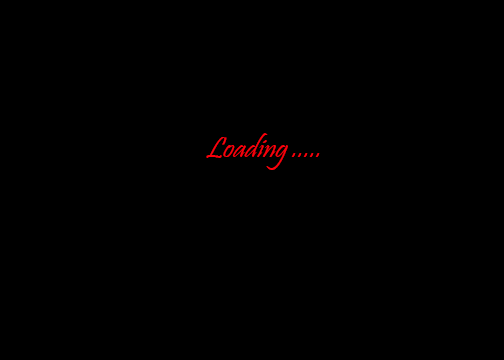
<style>
.page{position:relative;width:504px;height:360px;background:#000000}
.page>*{position:absolute;margin:0}
.t1{font:30px "Pristina-Regular";color:#fc000c;font-style:italic}
</style>
<div class="page">
<p class="t1" style="left:206px;top:133px;width:114px;height:37px">Loading .....</p>
</div>
